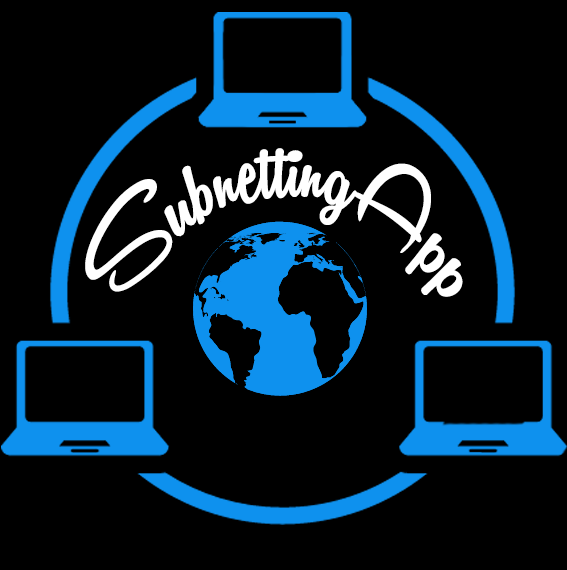
<style>
.page{position:relative;width:567px;height:570px;background:#000000}
.page>*{position:absolute;margin:0}
.t1{font:103.6px "RemachineScriptPersonalUseOnly";color:#ffffff;scale:0.69 1}
</style>
<div class="page">
<p class="t1" style="left:85px;top:148px;width:378px;height:149px">SubnettingApp</p>
</div>
